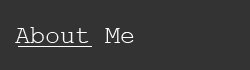
<style>
.page{position:relative;width:250px;height:70px;background:#333333}
.page>*{position:absolute;margin:0}
.t1{font:25px "CourierNewPSMT";color:#ffffff}
</style>
<div class="page">
<p class="t1" style="left:15px;top:27px;width:119px;height:16px">About Me</p>
</div>
